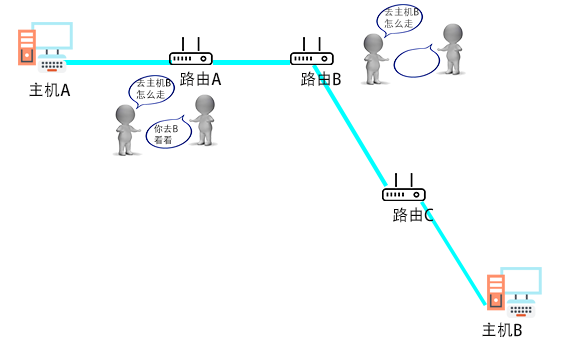
<style>
.page{position:relative;width:563px;height:349px;background:#ffffff}
.page>*{position:absolute;margin:0}
.t1{font:9.8px "AdobeHeitiStd-Regular";color:#474747}
.t2{font:9.8px "AdobeHeitiStd-Regular";color:#0a0909}
.t3{font:16px "AdobeHeitiStd-Regular";color:#0a0909}
.t4{font:9.4px "AdobeHeitiStd-Regular"}
</style>
<div class="page">
<p class="t1" style="left:384px;top:7px;width:35px;height:21px">去主机B<br>怎么走</p>
<p class="t2" style="left:136px;top:78px;width:35px;height:21px">去主机B<br>怎么走</p>
<p class="t3" style="left:180px;top:71px;width:42px;height:16px">路由A</p>
<p class="t3" style="left:301px;top:71px;width:40px;height:16px">路由B</p>
<p class="t3" style="left:29px;top:82px;width:42px;height:16px">主机A</p>
<p class="t4" style="left:154px;top:124px;width:24px;height:21px">你去B<br>看看</p>
<p class="t3" style="left:393px;top:207px;width:41px;height:16px">路由C</p>
<p class="t3" style="left:482px;top:322px;width:40px;height:16px">主机B</p>
</div>
